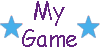
<style>
.page{position:relative;width:100px;height:50px;background:#ffffff}
.page>*{position:absolute;margin:0}
.t1{font:23.9px "ComicSansMS";color:#64247f;scale:0.96 1}
</style>
<div class="page">
<p class="t1" style="left:22px;top:1px;width:55px;height:46px;text-align:center">My <br>Game</p>
</div>
